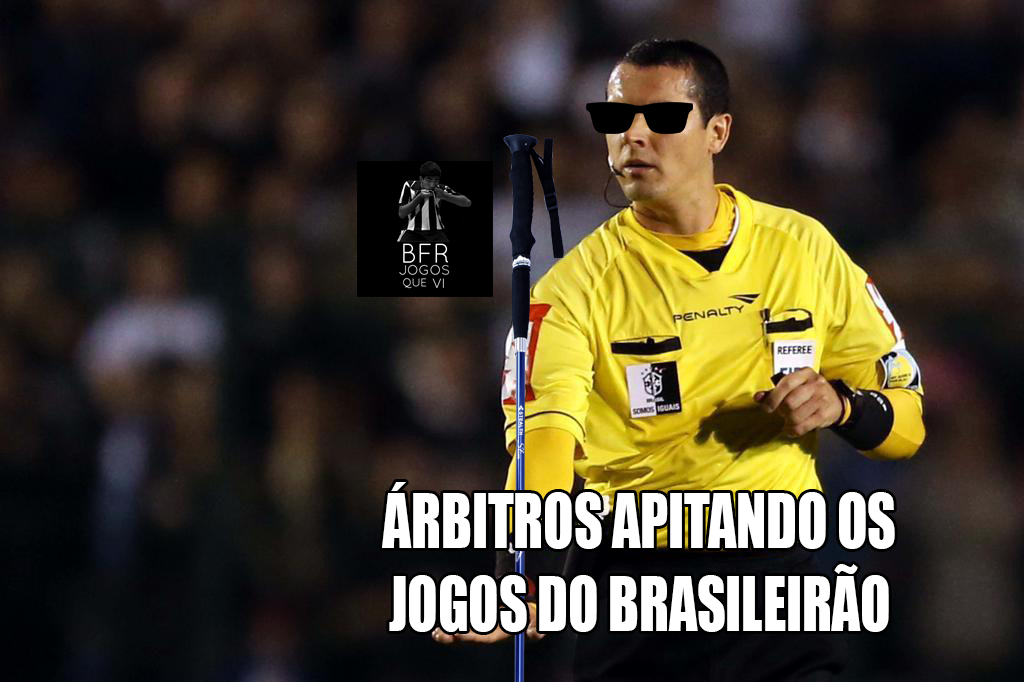
<style>
.page{position:relative;width:1024px;height:682px}
.page>*{position:absolute;margin:0}
.t1{font:69.5px "Impact";color:#ffffff;scale:0.8 1}
</style>
<div class="page">
<p class="t1" style="left:382px;top:482px;width:513px;height:150px;text-align:center">ÁRBITROS APITANDO OS <br>JOGOS DO BRASILEIRÃO</p>
</div>
